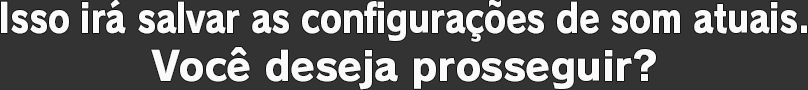
<style>
.page{position:relative;width:808px;height:90px;background:#333333}
.page>*{position:absolute;margin:0}
.t1{font:40px "RodinPro-EB";letter-spacing:-0.017em;color:#fbfafb;scale:0.85 1}
.t2{font:40px "RodinPro-EB";letter-spacing:-0.015em;color:#fbfafb}
</style>
<div class="page">
<p class="t1" style="left:1px;top:0px;width:806px;height:42px">Isso irá salvar as configurações de som atuais.</p>
<p class="t2" style="left:151px;top:47px;width:505px;height:43px">Você deseja prosseguir?</p>
</div>
